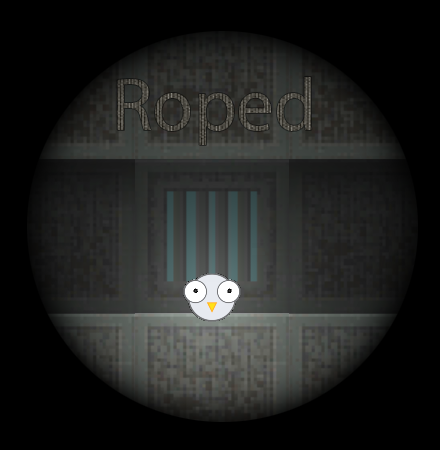
<style>
.page{position:relative;width:440px;height:450px;background:#000000}
.page>*{position:absolute;margin:0}
.t1{font:75px "MyriadPro-Regular";color:#4f4c44}
</style>
<div class="page">
<p class="t1" style="left:117px;top:77px;width:195px;height:68px">Roped</p>
</div>
